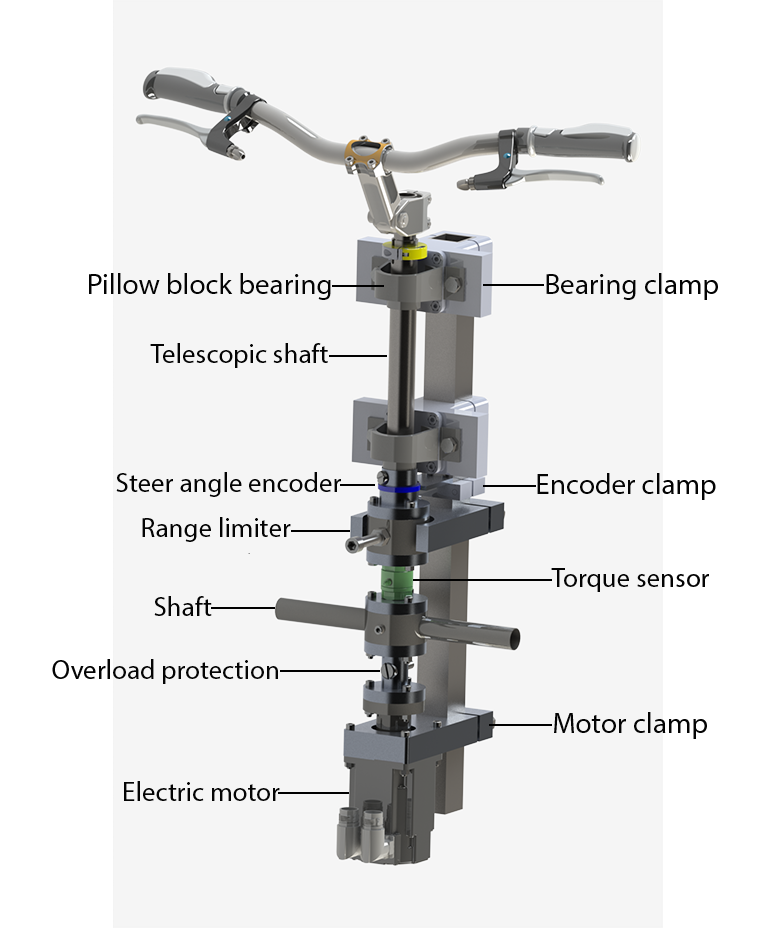
<style>
.page{position:relative;width:776px;height:928px;background:#f5f5f5}
.page>*{position:absolute;margin:0}
.t1{font:29.2px "MyriadPro-Regular";color:#040404}
.t2{font:27.1px "MyriadPro-Regular";color:#040404}
</style>
<div class="page">
<p class="t1" style="left:89px;top:273px;width:242px;height:27px">Pillow block bearing</p>
<p class="t1" style="left:546px;top:273px;width:172px;height:27px">Bearing clamp</p>
<p class="t2" style="left:150px;top:343px;width:178px;height:25px">Telescopic shaft</p>
<p class="t2" style="left:116px;top:472px;width:225px;height:25px">Steer angle encoder</p>
<p class="t1" style="left:537px;top:473px;width:179px;height:27px">Encoder clamp</p>
<p class="t2" style="left:142px;top:517px;width:149px;height:25px">Range limiter</p>
<p class="t2" style="left:551px;top:568px;width:158px;height:24px">Torque sensor</p>
<p class="t2" style="left:154px;top:596px;width:58px;height:20px">Shaft</p>
<p class="t2" style="left:52px;top:659px;width:226px;height:25px">Overload protection</p>
<p class="t1" style="left:554px;top:712px;width:153px;height:27px">Motor clamp</p>
<p class="t2" style="left:124px;top:781px;width:156px;height:20px">Electric motor</p>
</div>
